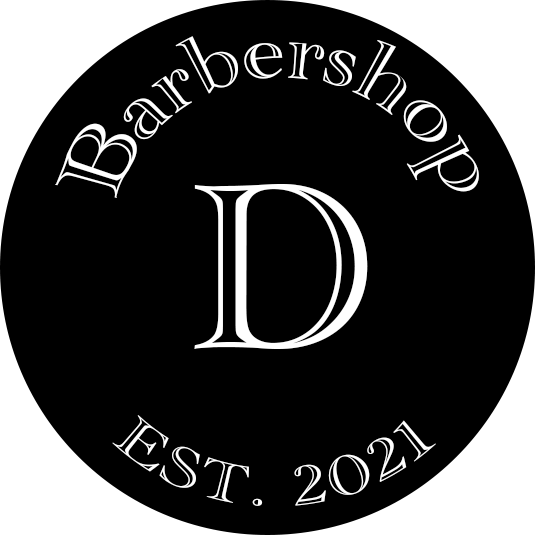
<style>
.page{position:relative;width:535px;height:535px;background:#000000}
.page>*{position:absolute;margin:0}
.t1{font:62.5px "AcademyEngravedLetPlain";letter-spacing:0.025em;color:#ffffff}
.t2{font:245.8px "AcademyEngravedLetPlain";letter-spacing:0.06em;color:#ffffff}
.t3{font:57.3px "AcademyEngravedLetPlain";letter-spacing:0.025em;color:#ffffff}
</style>
<div class="page">
<p class="t1" style="left:54px;top:36px;width:425px;height:162px;text-align:center">Barbershop</p>
<p class="t2" style="left:194px;top:184px;width:174px;height:165px">D</p>
<p class="t3" style="left:112px;top:415px;width:324px;height:91px">EST. 2021</p>
</div>
